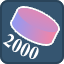
<style>
.page{position:relative;width:64px;height:64px;background:#355570}
.page>*{position:absolute;margin:0}
.t1{font:18px "TimesNewRomanPS-BoldMT";color:#ffffff}
</style>
<div class="page">
<p class="t1" style="left:3px;top:34px;width:36px;height:25px;rotate:27deg">2000</p>
</div>
